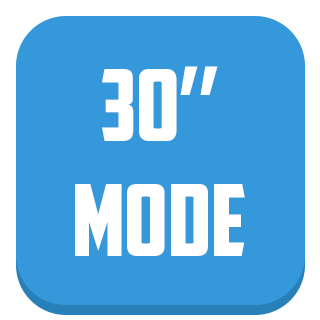
<style>
.page{position:relative;width:320px;height:320px;background:#3498db}
.page>*{position:absolute;margin:0}
.t1{font:100px "AmericanCaptain";color:#ffffff}
</style>
<div class="page">
<p class="t1" style="left:102px;top:66px;width:116px;height:75px">30’’</p>
<p class="t1" style="left:75px;top:184px;width:170px;height:72px">mode</p>
</div>
